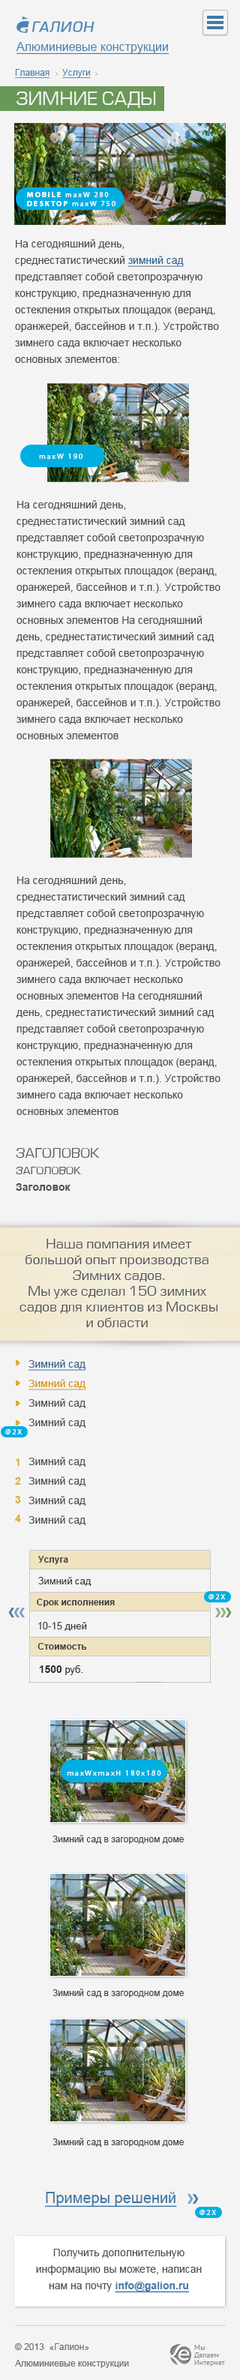
<style>
.page{position:relative;width:240px;height:2380px;background:#f4f4f4}
.page>*{position:absolute;margin:0}
.t1{font:12px "ArialMT";color:#4a84b2;text-decoration:underline}
.t2{font:9px "ArialMT";color:#4a84b3;text-decoration:underline}
.t3{font:18px "EuropeNormal";color:#f4f4f4;text-transform:uppercase}
.t4{font:7.6px/8.4px "MyriadPro-Regular";letter-spacing:0.18em;color:#ffffff}
.t5{font:7.6px/8.4px "MyriadPro-Bold";letter-spacing:0.18em;color:#ffffff}
.t6{font:10.5px/16.5px "ArialMT";color:#515151}
.t7{font:10.5px/16.5px "ArialMT";color:#356892;text-decoration:underline}
.t8{font:7.6px "MyriadPro-Regular";letter-spacing:0.18em;color:#ffffff}
.t9{font:13.5px/16.5px "EuropeNormal";color:#5b5b5b;text-transform:uppercase}
.t10{font:10.5px/16.5px "EuropeNormal";color:#5b5b5b;text-transform:uppercase}
.t11{font:10.5px/16.5px "Arial-BoldMT";color:#515151}
.t12{font:13.5px/15.8px "EuropeNormal";color:#545454}
.t13{font:10.5px/19.5px "ArialMT";color:#515151}
.t14{font:10.5px/19.5px "ArialMT";color:#356892;text-decoration:underline}
.t15{font:10.5px/19.5px "ArialMT";color:#d9920a;text-decoration:underline}
.t16{font:7.6px "MyriadPro-Regular";letter-spacing:0.18em;color:#ffffff;text-transform:uppercase}
.t17{font:10.5px/18.8px "Arial-BoldMT";color:#dcaf29}
.t18{font:9px "Arial-BoldMT";color:#3f3f3f}
.t19{font:9.8px "ArialMT";color:#3d3d3d}
.t20{font:10.5px "Arial-BoldMT";color:#2b2b2b}
.t21{font:9.8px "ArialMT";color:#2b2b2b}
.t22{font:9px "ArialMT";color:#454545}
.t23{font:15px "ArialMT";color:#3f78a7;text-decoration:underline}
.t24{font:10.5px/16.5px "Arial-BoldMT";color:#3f79ac;text-decoration:underline}
.t25{font:9px/16.5px "ArialMT";color:#6d6d6d}
.t26{font:9px/10.5px "ArialMT";color:#6d6d6d}
.t27{font:7.5px/7.5px "PTSans-Regular";color:#636363}
</style>
<div class="page">
<p class="t1" style="left:16px;top:42px;width:153px;height:13px">Алюминиевые конструкции</p>
<p class="t2" style="left:15px;top:69px;width:76px;height:10px">Главная     Услуги</p>
<p class="t3" style="left:16px;top:92px;width:140px;height:16px">ЗИМНИЕ САДЫ</p>
<p class="t4" style="left:27px;top:192px;width:89px;height:14px"><span class="t5">MOBILE </span>maxW 280<br><span class="t5">DESKTOP </span>maxW 750</p>
<p class="t6" style="left:15px;top:239px;width:204px;height:124px">На сегодняшний день, среднестатистический <span class="t7">зимний сад</span> представляет собой светопрозрачную конструкцию, предназначенную для остекления открытых площадок (веранд, оранжерей, бассейнов и т.п.). Устройство зимнего сада включает несколько основных элементов:</p>
<p class="t8" style="left:39px;top:454px;width:43px;height:5px">maxW 190</p>
<p class="t6" style="left:16px;top:500px;width:204px;height:240px">На сегодняшний день, среднестатистический зимний сад представляет собой светопрозрачную конструкцию, предназначенную для остекления открытых площадок (веранд, оранжерей, бассейнов и т.п.). Устройство зимнего сада включает несколько основных элементов На сегодняшний день, среднестатистический зимний сад представляет собой светопрозрачную конструкцию, предназначенную для остекления открытых площадок (веранд, оранжерей, бассейнов и т.п.). Устройство зимнего сада включает несколько основных элементов</p>
<p class="t6" style="left:16px;top:876px;width:204px;height:239px">На сегодняшний день, среднестатистический зимний сад представляет собой светопрозрачную конструкцию, предназначенную для остекления открытых площадок (веранд, оранжерей, бассейнов и т.п.). Устройство зимнего сада включает несколько основных элементов На сегодняшний день, среднестатистический зимний сад представляет собой светопрозрачную конструкцию, предназначенную для остекления открытых площадок (веранд, оранжерей, бассейнов и т.п.). Устройство зимнего сада включает несколько основных элементов</p>
<p class="t9" style="left:16px;top:1148px;width:84px;height:43px">ЗАголовок<br><span class="t10">Заголовок<br></span><span class="t11">Заголовок</span></p>
<p class="t12" style="left:20px;top:1239px;width:198px;height:89px;text-align:center">Наша помпания имеет<br>большой опыт производства <br>Зимних садов.<br>Мы уже сделал 150 зимних <br>садов для клиентов из Москвы<br>и области</p>
<p class="t13" style="left:28px;top:1360px;width:58px;height:166px"><span class="t14">Зимний сад<br></span><span class="t15">Зимний сад<br></span>Зимний сад<br>Зимний сад<br><br>Зимний сад<br>Зимний сад<br>Зимний сад<br>Зимний сад</p>
<p class="t16" style="left:5px;top:1430px;width:17px;height:5px">@2X</p>
<p class="t17" style="left:15px;top:1459px;width:6px;height:63px">1<br>2<br>3<br>4</p>
<p class="t18" style="left:38px;top:1556px;width:30px;height:8px">Услуга</p>
<p class="t19" style="left:38px;top:1577px;width:54px;height:9px">Зимний сад</p>
<p class="t18" style="left:37px;top:1599px;width:78px;height:8px">Срок исполнения</p>
<p class="t16" style="left:208px;top:1594px;width:17px;height:6px">@2X</p>
<p class="t19" style="left:38px;top:1622px;width:49px;height:9px">10-15 дней</p>
<p class="t18" style="left:38px;top:1643px;width:49px;height:7px">Стоимость</p>
<p class="t20" style="left:39px;top:1666px;width:44px;height:10px">1500<span class="t21"> руб.</span></p>
<p class="t8" style="left:68px;top:1771px;width:93px;height:5px">maxWxmaxH 180x180</p>
<p class="t22" style="left:52px;top:1835px;width:132px;height:9px">Зимний сад в загородном доме</p>
<p class="t22" style="left:52px;top:1989px;width:132px;height:9px">Зимний сад в загородном доме</p>
<p class="t22" style="left:52px;top:2138px;width:132px;height:9px">Зимний сад в загородном доме</p>
<p class="t23" style="left:45px;top:2192px;width:132px;height:16px">Примеры решений</p>
<p class="t16" style="left:200px;top:2210px;width:16px;height:6px">@2X</p>
<p class="t6" style="left:36px;top:2249px;width:166px;height:45px;text-align:center">Получить дополнительную информацию вы можете, написан нам на почту <span class="t24">info@galion.ru</span></p>
<p class="t25" style="left:14px;top:2344px;width:115px;height:24px">© 2013  «Галион»<br>Алюминиевые <span class="t26">конструкции</span></p>
<p class="t27" style="left:194px;top:2345px;width:31px;height:22px">Мы <br>Делаем<br>Интернет</p>
</div>
